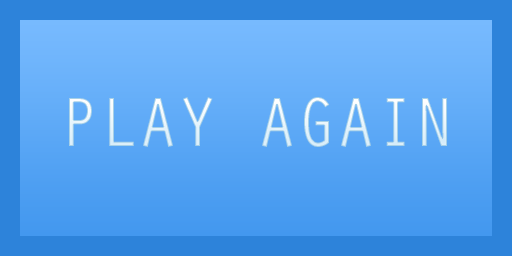
<style>
.page{position:relative;width:512px;height:256px;background:#2d83da}
.page>*{position:absolute;margin:0}
.t1{font:72px "OratorStd";letter-spacing:-0.05em}
</style>
<div class="page">
<p class="t1" style="left:69px;top:97px;width:378px;height:50px">PLAY AGAIN</p>
</div>
